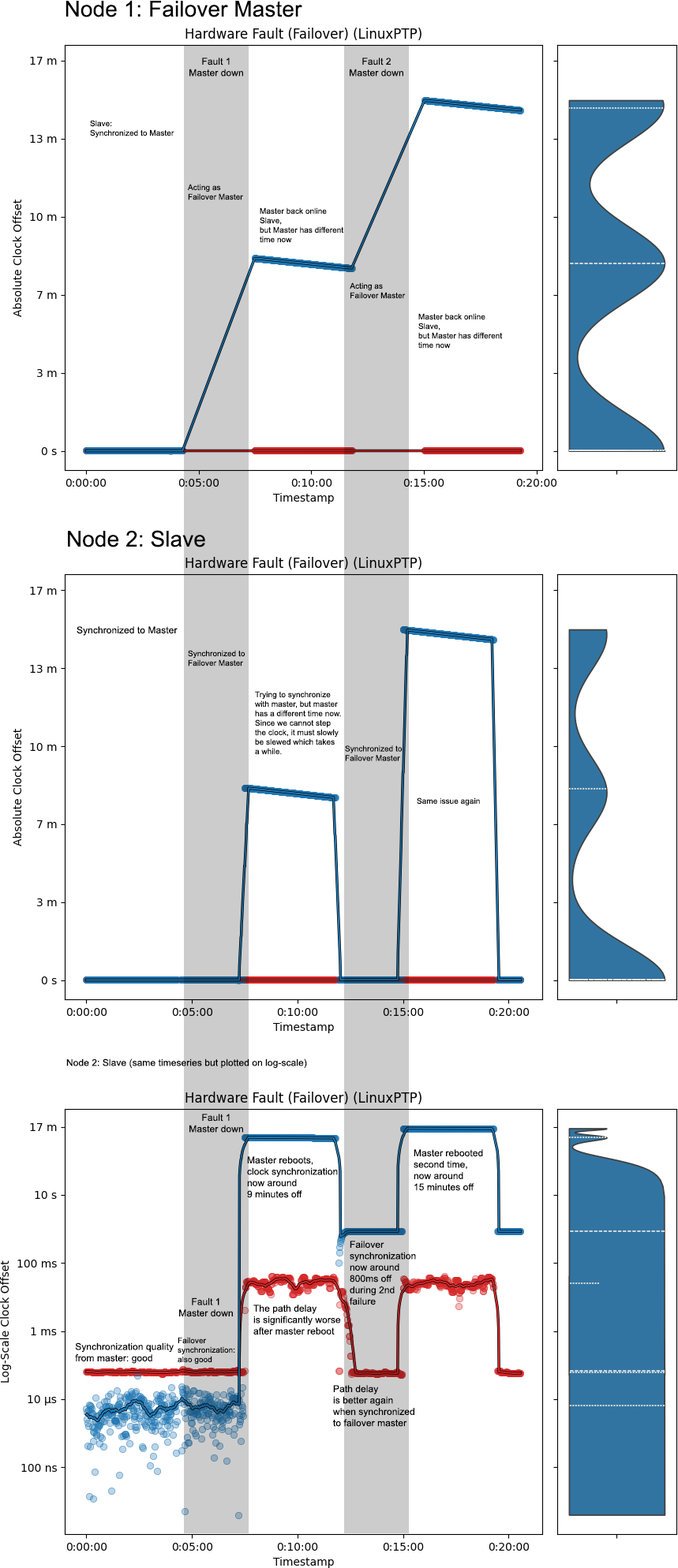
<style>
.page{position:relative;width:678px;height:1568px;background:#ffffff}
.page>*{position:absolute;margin:0}
.t1{font:22px "ArialMT";letter-spacing:0.005em;color:#000000}
.t2{font:9.5px "ArialMT";letter-spacing:0.005em;color:#000000}
.t3{font:7.9px "ArialMT";letter-spacing:0.005em;color:#000000}
</style>
<div class="page">
<p class="t1" style="left:65px;top:0px;width:237px;height:17px">Node 1: Failover Master</p>
<p class="t2" style="left:189px;top:58px;width:54px;height:19px;text-align:center">Fault 1<br>Master down</p>
<p class="t2" style="left:349px;top:58px;width:54px;height:19px;text-align:center">Fault 2<br>Master down</p>
<p class="t3" style="left:90px;top:120px;width:84px;height:18px">Slave: <br>Synchronized to Master</p>
<p class="t3" style="left:187px;top:184px;width:56px;height:16px">Acting as<br>Failover Master</p>
<p class="t3" style="left:259px;top:207px;width:85px;height:36px">Master back online<br>Slave,<br>but Master has different <br>time now</p>
<p class="t3" style="left:349px;top:282px;width:56px;height:17px">Acting as<br>Failover Master</p>
<p class="t3" style="left:418px;top:313px;width:84px;height:36px">Master back online<br>Slave,<br>but Master has different <br>time now</p>
<p class="t1" style="left:68px;top:530px;width:137px;height:17px">Node 2: Slave</p>
<p class="t2" style="left:77px;top:626px;width:100px;height:10px">Synchronized to Master</p>
<p class="t3" style="left:188px;top:650px;width:57px;height:16px">Synchronized to <br>Failover Master</p>
<p class="t3" style="left:255px;top:691px;width:86px;height:64px">Trying to synchronize<br>with master, but master<br>has a different time now.<br>Since we cannot step <br>the clock, it must slowly <br>be slewed which takes<br>a while.</p>
<p class="t3" style="left:345px;top:745px;width:57px;height:16px">Synchronized to <br>Failover Master</p>
<p class="t3" style="left:416px;top:797px;width:64px;height:9px">Same issue again</p>
<p class="t2" style="left:66px;top:1058px;width:241px;height:10px">Node 2: Slave (same timeseries but plotted on log-scale)</p>
<p class="t2" style="left:189px;top:1114px;width:54px;height:19px;text-align:center">Fault 1<br>Master down</p>
<p class="t2" style="left:247px;top:1156px;width:91px;height:42px">Master reboots,<br>clock synchronization<br>now around <br>9 minutes off</p>
<p class="t2" style="left:413px;top:1149px;width:70px;height:42px">Master rebooted<br>second time,<br>now around<br>15 minutes off</p>
<p class="t2" style="left:349px;top:1241px;width:67px;height:64px">Failover<br>synchronization<br>now around<br>800ms off<br>during 2nd<br>failure</p>
<p class="t2" style="left:179px;top:1297px;width:54px;height:20px;text-align:center">Fault 1<br>Master down</p>
<p class="t2" style="left:253px;top:1305px;width:88px;height:30px">The path delay<br>is significantly worse<br>after master reboot</p>
<p class="t3" style="left:177px;top:1337px;width:58px;height:28px">Failover<br>synchronization:<br>also good</p>
<p class="t2" style="left:75px;top:1342px;width:99px;height:22px">Synchronization quality <br>from master: good</p>
<p class="t2" style="left:333px;top:1385px;width:81px;height:42px">Path delay<br>is better again<br>when synchronized<br>to failover master</p>
</div>
